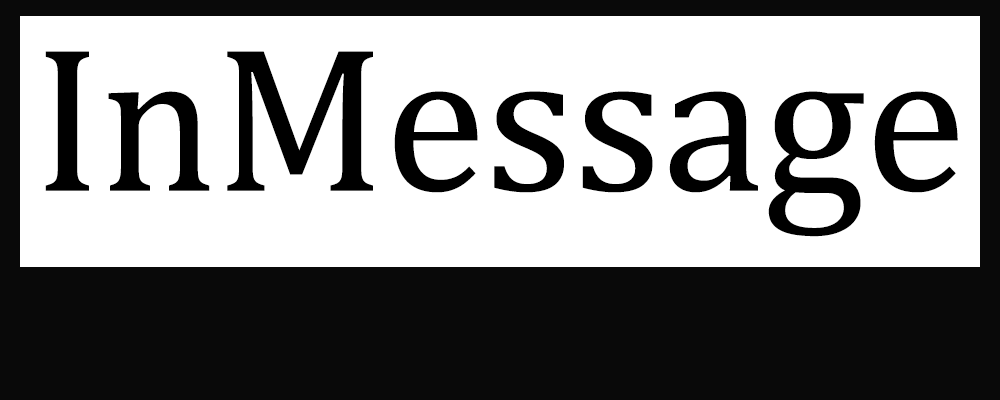
<style>
.page{position:relative;width:1000px;height:400px;background:#ffffff}
.page>*{position:absolute;margin:0}
.t1{font:208.3px "Cambria";letter-spacing:-0.005em;color:#000000}
</style>
<div class="page">
<p class="t1" style="left:45px;top:51px;width:913px;height:186px">InMessage</p>
</div>
